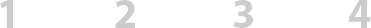
<style>
.page{position:relative;width:371px;height:28px;background:#ffffff}
.page>*{position:absolute;margin:0}
.t1{font:42px "MyriadPro-Bold";color:#cccccc}
</style>
<div class="page">
<p class="t1" style="left:0px;top:0px;width:13px;height:28px">1</p>
<p class="t1" style="left:115px;top:0px;width:20px;height:28px">2</p>
<p class="t1" style="left:233px;top:0px;width:20px;height:28px">3</p>
<p class="t1" style="left:349px;top:0px;width:22px;height:28px">4</p>
</div>
